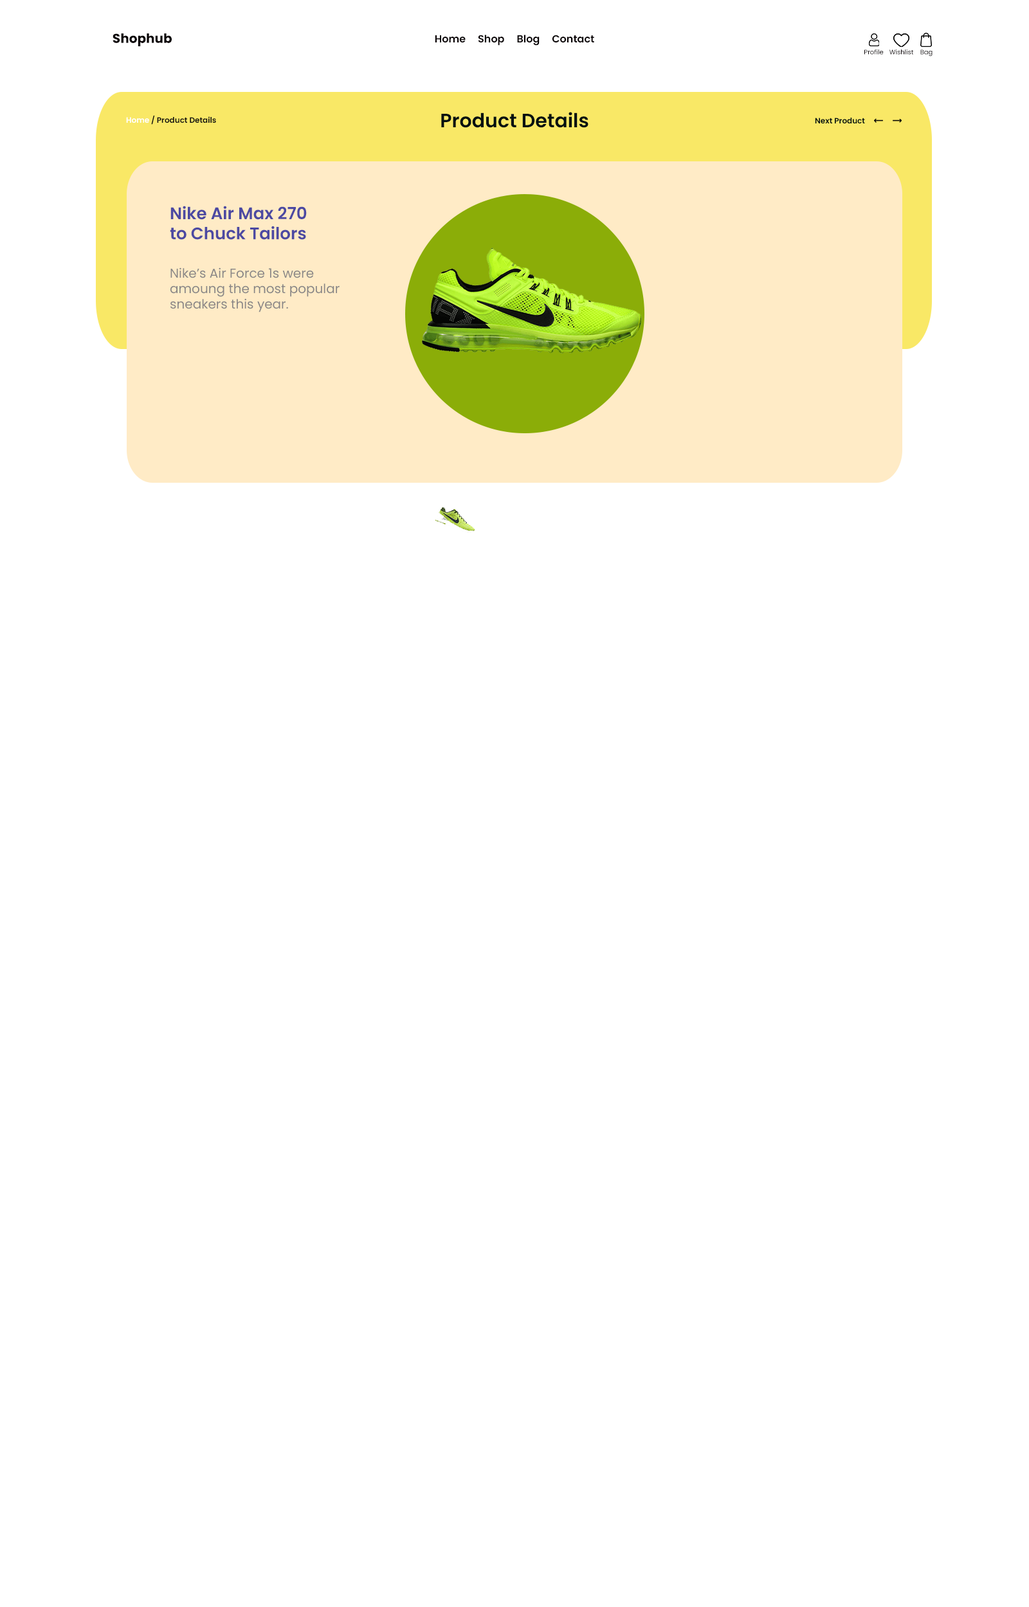
<style>
.page{position:relative;width:1029px;height:1607px;background:#ffffff}
.page>*{position:absolute;margin:0}
.t1{font:12.9px "Poppins-Bold";color:#080204}
.t2{font:10.3px "Poppins-SemiBold";color:#080204}
.t3{font:6.4px "Poppins-Regular";color:#080204}
.t4{font:19.3px "Poppins-SemiBold";color:#001010}
.t5{font:7.7px "Poppins-SemiBold";color:#101010}
.t6{font:7.7px "Poppins-SemiBold";color:#ffffff}
.t7{font:7.7px "Poppins-SemiBold";color:#001010}
.t8{font:16.7px "Poppins-SemiBold";color:#4c49a2}
.t9{font:12.9px "Poppins-Regular";color:#888686}
</style>
<div class="page">
<p class="t1" style="left:113px;top:33px;width:59px;height:13px">Shophub</p>
<p class="t2" style="left:435px;top:35px;width:159px;height:11px">Home     Shop     Blog     Contact</p>
<p class="t3" style="left:864px;top:49px;width:19px;height:6px">Profile</p>
<p class="t3" style="left:889px;top:50px;width:24px;height:5px">Wishlist</p>
<p class="t3" style="left:920px;top:50px;width:12px;height:7px">Bag</p>
<p class="t4" style="left:441px;top:112px;width:147px;height:16px">Product Details</p>
<p class="t5" style="left:126px;top:115px;width:90px;height:10px"><span class="t6">Home </span>/ Product Details</p>
<p class="t7" style="left:815px;top:118px;width:50px;height:5px">Next Product</p>
<p class="t8" style="left:170px;top:206px;width:137px;height:34px">Nike Air Max 270<br>to Chuck Tailors</p>
<p class="t9" style="left:170px;top:267px;width:169px;height:45px">Nike’s Air Force 1s were<br>amoung the most popular<br>sneakers this year.</p>
</div>
